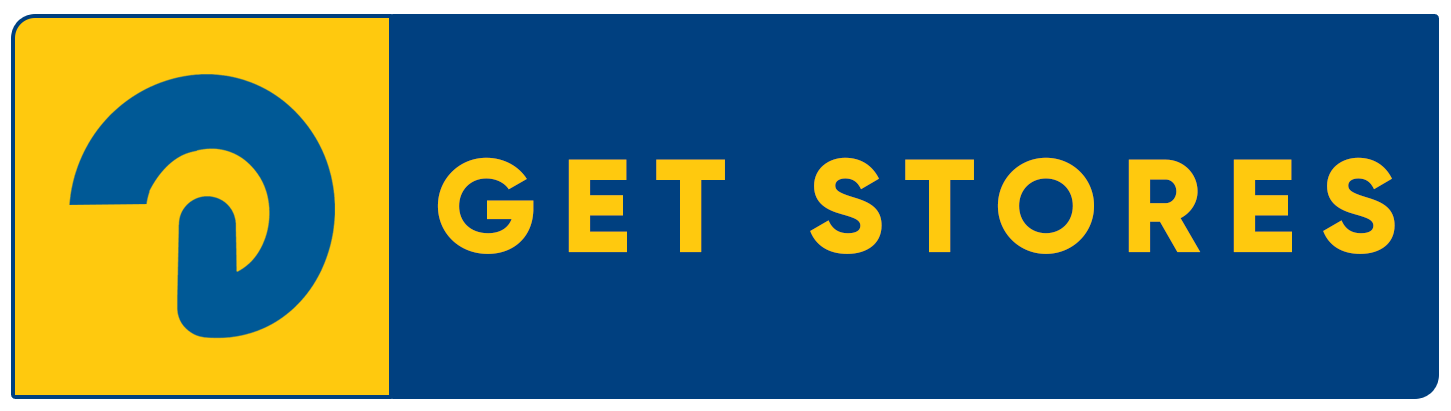
<style>
.page{position:relative;width:1451px;height:411px;background:#004080}
.page>*{position:absolute;margin:0}
.t1{font:131.9px "Gilroy-ExtraBold";letter-spacing:0.18em;color:#ffc90e}
</style>
<div class="page">
<p class="t1" style="left:437px;top:157px;width:958px;height:97px">GET STORES</p>
</div>
